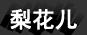
<style>
.page{position:relative;width:87px;height:35px;background:#333333}
.page>*{position:absolute;margin:0}
.t1{font:22.2px "SimHei";color:#ffffff;font-weight:bold}
</style>
<div class="page">
<p class="t1" style="left:10px;top:9px;width:67px;height:21px">梨花儿</p>
</div>
